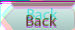
<style>
.page{position:relative;width:75px;height:30px}
.page>*{position:absolute;margin:0}
.t1{font:16px "MyriadPro-Regular"}
</style>
<div class="page">
<p class="t1" style="left:26px;top:8px;width:31px;height:12px">Back</p>
</div>
